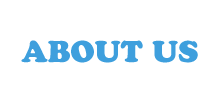
<style>
.page{position:relative;width:220px;height:100px;background:#ffffff}
.page>*{position:absolute;margin:0}
.t1{font:30px "CooperBlackStd";color:#3e9fdd}
</style>
<div class="page">
<p class="t1" style="left:21px;top:40px;width:177px;height:23px">ABOUT US</p>
</div>
